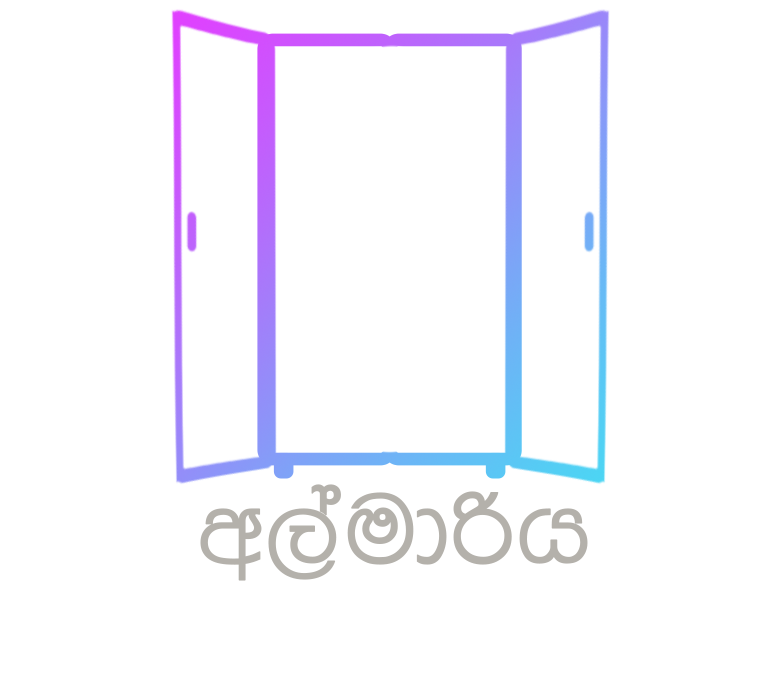
<style>
.page{position:relative;width:780px;height:688px;background:#ffffff}
.page>*{position:absolute;margin:0}
.t1{font:106.4px "4u-Milith-";color:#b4b1ab;font-weight:bold}
</style>
<div class="page">
<p class="t1" style="left:200px;top:484px;width:388px;height:97px">w,audßh</p>
</div>
